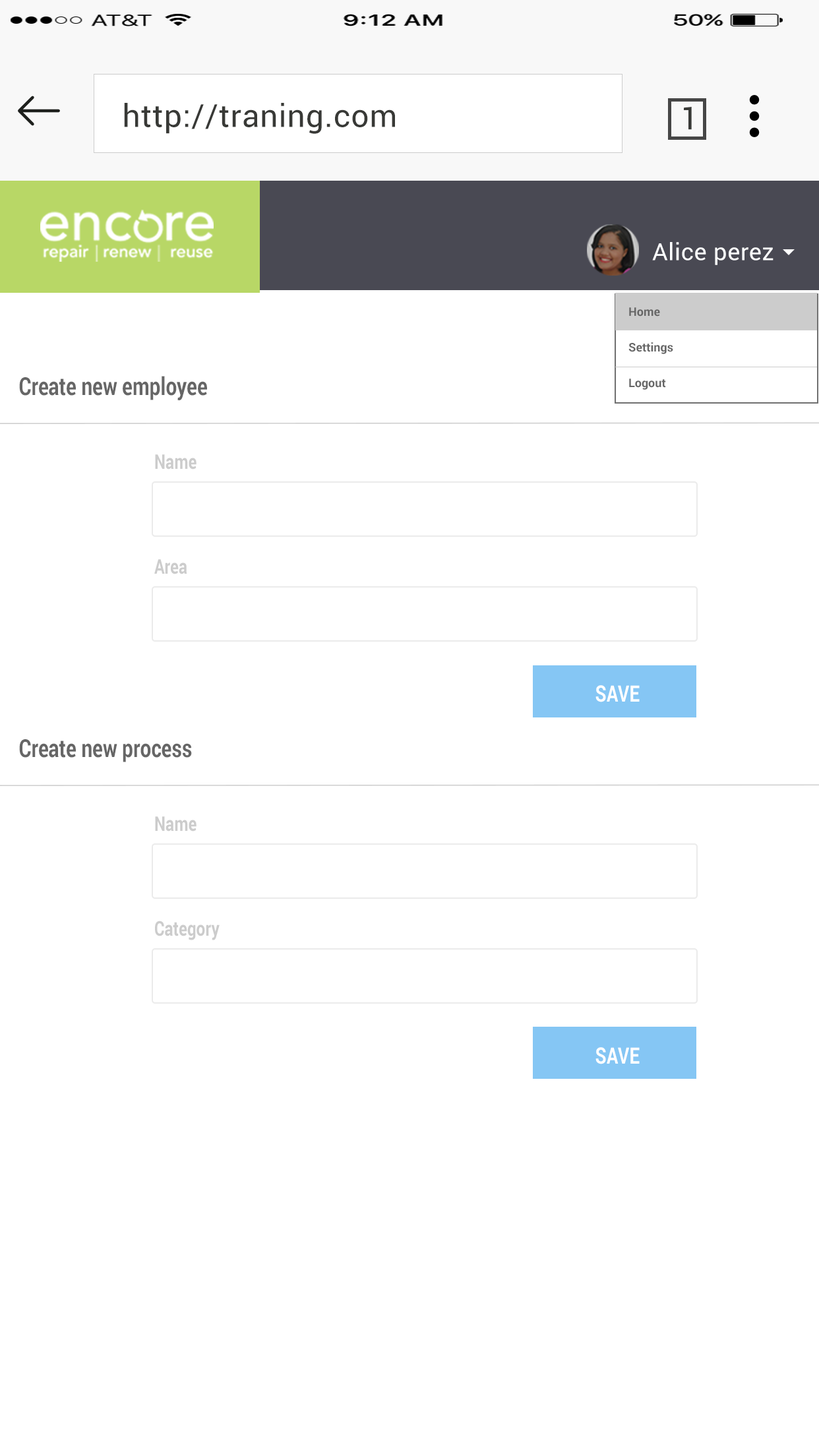
<style>
.page{position:relative;width:819px;height:1456px;background:#ffffff}
.page>*{position:absolute;margin:0}
.t1{font:31.7px "Roboto-Regular";letter-spacing:0.02em;color:#383936}
.t2{font:23.7px "Roboto-Regular";letter-spacing:0.02em;color:#fdfeff}
.t3{font:11.9px "Roboto-Bold";color:#666666}
.t4{font:24.8px "Roboto-Bold";color:#666666;scale:0.79 1}
.t5{font:20.3px "Roboto-Bold";color:#cccccc;scale:0.79 1}
.t6{font:22.5px "Roboto-Bold";color:#ffffff;scale:0.79 1}
</style>
<div class="page">
<p class="t1" style="left:124px;top:103px;width:271px;height:31px">http://traning.com</p>
<p class="t1" style="left:684px;top:107px;width:8px;height:23px">1</p>
<p class="t2" style="left:652px;top:242px;width:121px;height:23px">Alice perez</p>
<p class="t3" style="left:629px;top:307px;width:31px;height:10px">Home</p>
<p class="t3" style="left:628px;top:342px;width:45px;height:12px">Settings</p>
<p class="t4" style="left:19px;top:376px;width:188px;height:24px">Create new employee</p>
<p class="t3" style="left:629px;top:379px;width:37px;height:11px">Logout</p>
<p class="t5" style="left:155px;top:454px;width:42px;height:16px">Name</p>
<p class="t5" style="left:154px;top:559px;width:33px;height:15px">Area</p>
<p class="t6" style="left:595px;top:685px;width:45px;height:17px">SAVE</p>
<p class="t4" style="left:19px;top:739px;width:173px;height:23px">Create new process</p>
<p class="t5" style="left:155px;top:816px;width:42px;height:16px">Name</p>
<p class="t5" style="left:155px;top:921px;width:65px;height:19px">Category</p>
<p class="t6" style="left:595px;top:1047px;width:45px;height:17px">SAVE</p>
</div>
